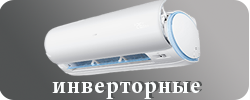
<style>
.page{position:relative;width:250px;height:100px}
.page>*{position:absolute;margin:0}
.t1{font:24px "MinionPro-BoldCnCapt";letter-spacing:0.05em;color:#fbfdfd;font-variant:small-caps}
</style>
<div class="page">
<p class="t1" style="left:52px;top:82px;width:148px;height:17px">инверторные</p>
</div>
